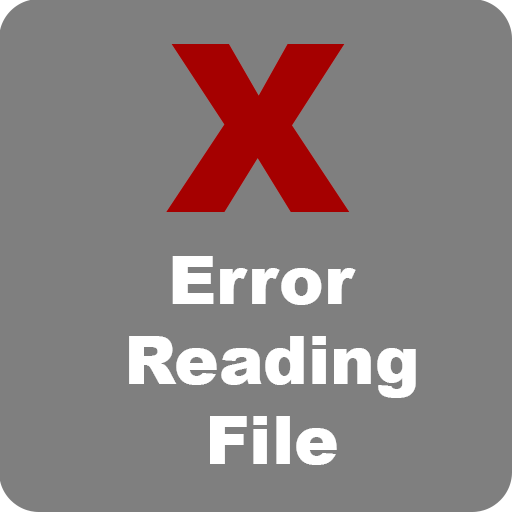
<style>
.page{position:relative;width:512px;height:512px;background:#7f7f7f}
.page>*{position:absolute;margin:0}
.t1{font:235.3px "Arial-Black";color:#a50000}
.t2{font:66.7px "Arial-Black";color:#ffffff}
</style>
<div class="page">
<p class="t1" style="left:166px;top:44px;width:184px;height:168px">X</p>
<p class="t2" style="left:129px;top:256px;width:287px;height:209px;text-align:center">Error <br>Reading<br>File</p>
</div>
